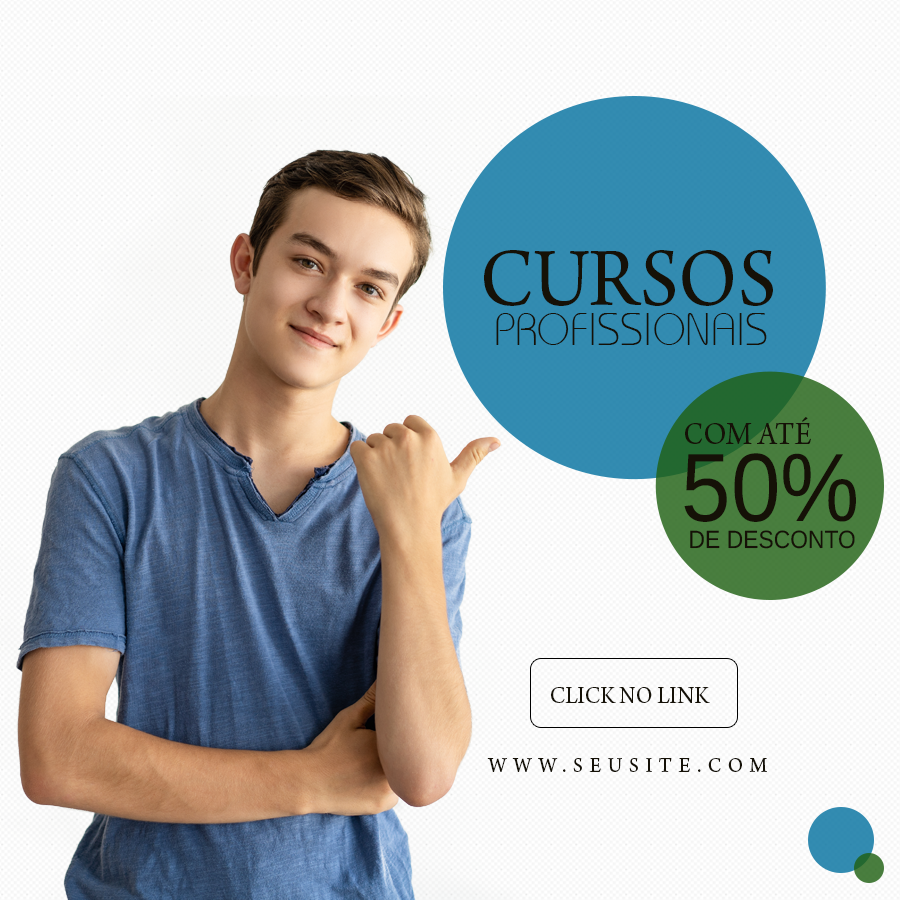
<style>
.page{position:relative;width:900px;height:900px}
.page>*{position:absolute;margin:0}
.t1{font:87.2px "ArnoPro-Regular";color:#151107;scale:0.92 1}
.t2{font:45.5px "BaronLightDBNormal";color:#151107;scale:0.92 1}
.t3{font:33.5px "ArnoPro-Regular";color:#151107;scale:0.92 1}
.t4{font:97px "Arimo";color:#151107;scale:0.92 1}
.t5{font:24.9px "Arimo";color:#151107;scale:0.92 1}
.t6{font:24.9px "ArnoPro-Regular";color:#151107;scale:0.92 1}
.t7{font:22.1px "ArnoPro-Regular";letter-spacing:0.34em;color:#151107;scale:0.92 1}
</style>
<div class="page">
<p class="t1" style="left:484px;top:250px;width:289px;height:56px">CURSOS</p>
<p class="t2" style="left:496px;top:313px;width:271px;height:32px">PROFISSIONAIS</p>
<p class="t3" style="left:685px;top:417px;width:126px;height:27px">COM ATÉ</p>
<p class="t4" style="left:684px;top:453px;width:172px;height:69px">50%</p>
<p class="t5" style="left:690px;top:530px;width:165px;height:19px">DE DESCONTO</p>
<p class="t6" style="left:551px;top:687px;width:159px;height:16px">CLICK NO LINK</p>
<p class="t7" style="left:487px;top:758px;width:280px;height:14px">WWW.SEUSITE.COM</p>
</div>
